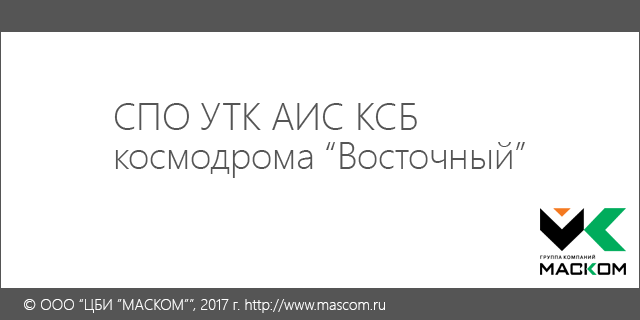
<style>
.page{position:relative;width:640px;height:320px;background:#ffffff}
.page>*{position:absolute;margin:0}
.t1{font:37.5px/38.8px "SegoeUI-Light";color:#555555}
.t2{font:37.5px/8.7px "SegoeUI-Light";color:#555555}
.t3{font:15px "SegoeUI-Light";color:#ffffff}
</style>
<div class="page">
<p class="t1" style="left:114px;top:103px;width:411px;height:75px;text-align:right"><span class="t2">СПО УТК АИС КСБ <br></span>космодрома “Восточный”</p>
<p class="t3" style="left:24px;top:299px;width:361px;height:14px">© ООО “ЦБИ ”МАСКОМ””, 2017 г. http://www.mascom.ru</p>
</div>
